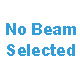
<style>
.page{position:relative;width:80px;height:80px;background:#ffffff}
.page>*{position:absolute;margin:0}
.t1{font:18px "FranklinGothic-Demi";color:#339ed9}
</style>
<div class="page">
<p class="t1" style="left:6px;top:23px;width:70px;height:33px;text-align:center">No Beam<br>Selected</p>
</div>
